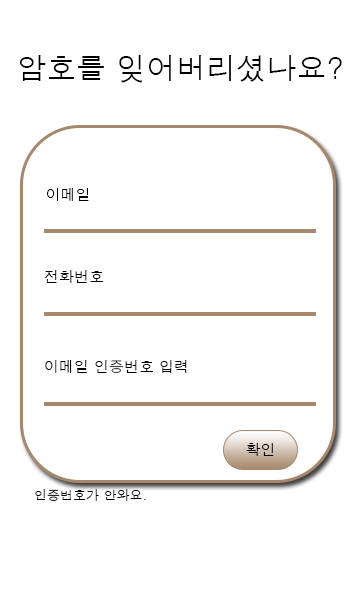
<style>
.page{position:relative;width:360px;height:600px;background:#ffffff}
.page>*{position:absolute;margin:0}
.t1{font:30px "Dotum";color:#000000}
.t2{font:15px "Dotum";color:#000000}
.t3{font:14.9px "Dotum";color:#000000}
.t4{font:13px "Dotum";color:#000000}
</style>
<div class="page">
<p class="t1" style="left:19px;top:55px;width:323px;height:28px">암호를 잊어버리셨나요?</p>
<p class="t2" style="left:47px;top:188px;width:42px;height:13px">이메일</p>
<p class="t3" style="left:44px;top:270px;width:59px;height:13px">전화번호</p>
<p class="t3" style="left:45px;top:360px;width:142px;height:13px">이메일 인증번호 입력</p>
<p class="t2" style="left:246px;top:443px;width:28px;height:13px">확인</p>
<p class="t4" style="left:35px;top:489px;width:111px;height:12px">인증번호가 안와요.</p>
</div>
